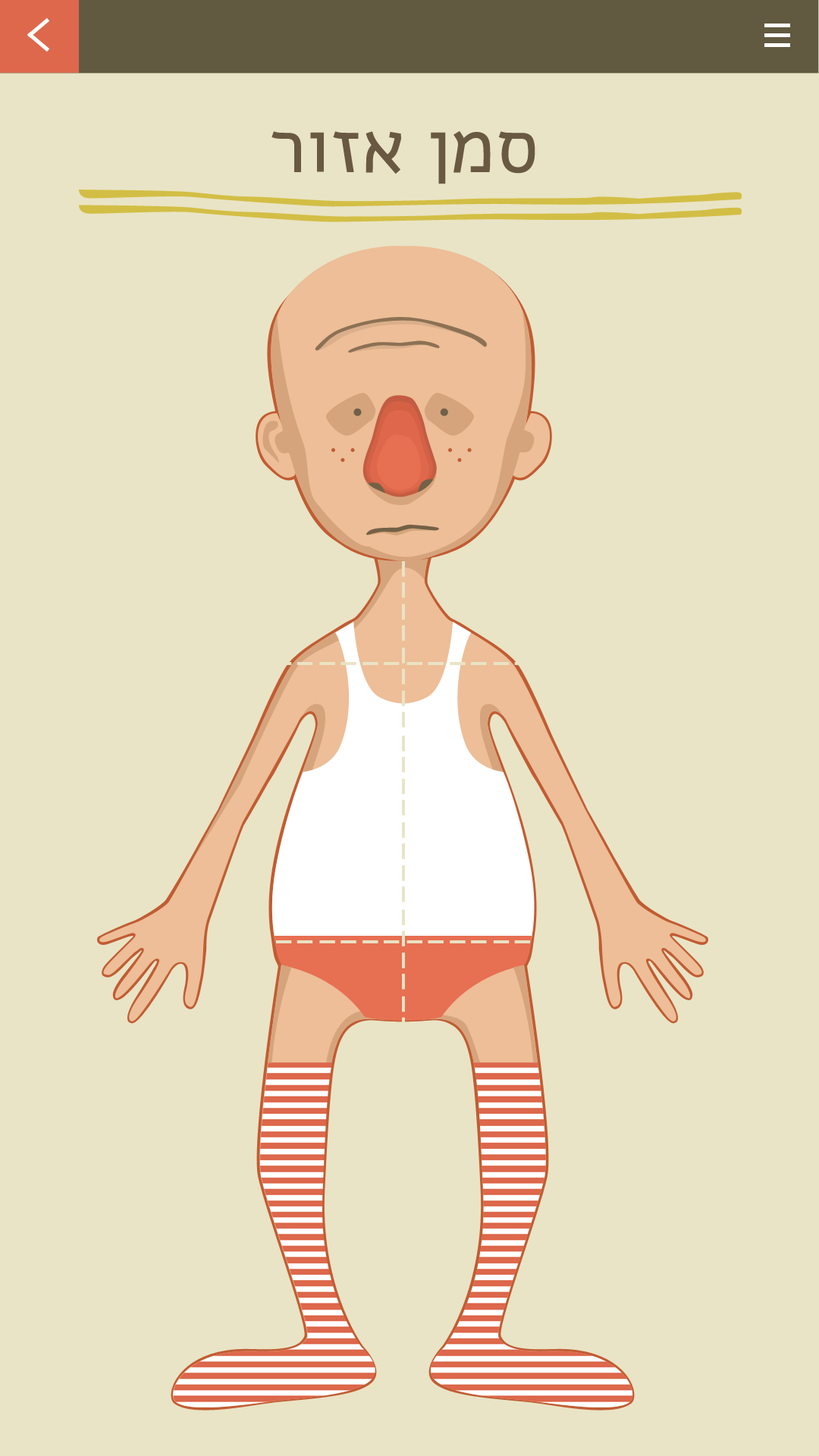
<style>
.page{position:relative;width:819px;height:1456px;background:#e9e4c6}
.page>*{position:absolute;margin:0}
.t1{font:77px "Alef-Regular";color:#6a5942}
</style>
<div class="page">
<p class="t1" style="left:271px;top:131px;width:264px;height:53px">רוזא ןמס</p>
</div>
